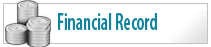
<style>
.page{position:relative;width:211px;height:47px;background:#ffffff}
.page>*{position:absolute;margin:0}
.t1{font:24px "MyriadPro-SemiboldCond";color:#11839a;scale:0.78 1}
</style>
<div class="page">
<p class="t1" style="left:58px;top:13px;width:99px;height:17px">Financial Record</p>
</div>
